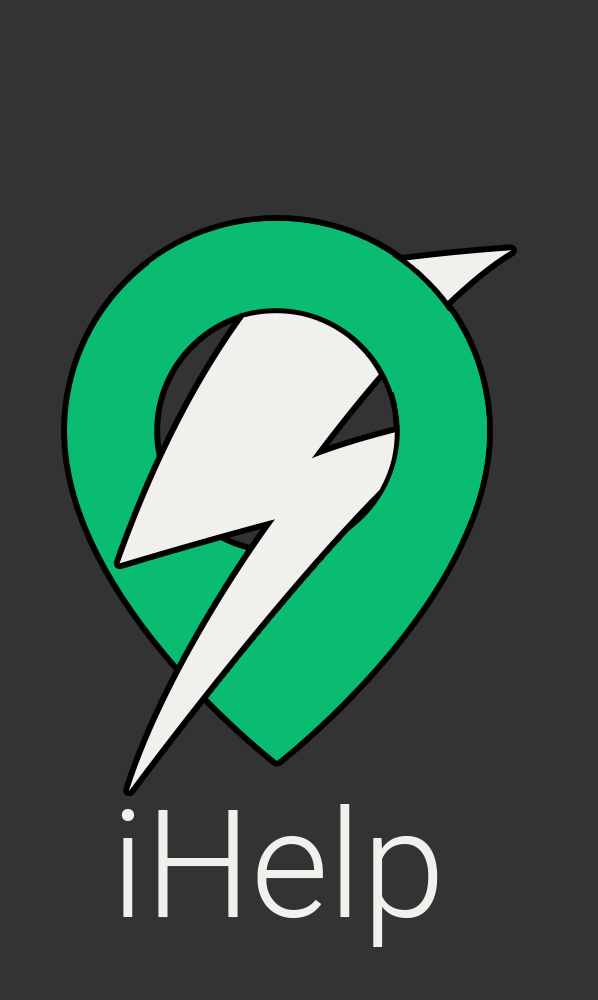
<style>
.page{position:relative;width:598px;height:1000px;background:#333333}
.page>*{position:absolute;margin:0}
.t1{font:150px "Roboto-Light";color:#f1f0ed}
</style>
<div class="page">
<p class="t1" style="left:121px;top:804px;width:317px;height:143px">iHelp</p>
</div>
